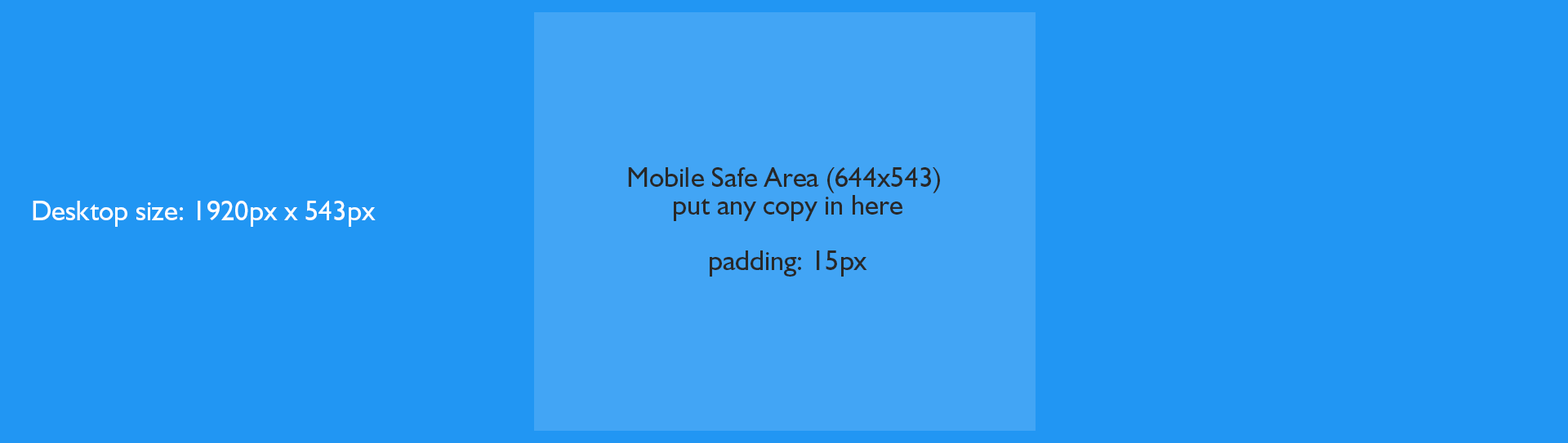
<style>
.page{position:relative;width:1568px;height:443px;background:#2196f3}
.page>*{position:absolute;margin:0}
.t1{font:28.1px/27.8px "Humanist521BT-Roman";color:#282828}
.t2{font:28.1px "Humanist521BT-Roman";color:#ffffff}
</style>
<div class="page">
<p class="t1" style="left:628px;top:167px;width:312px;height:110px;text-align:center">Mobile Safe Area (644x543) <br>put any copy in here<br><br>padding: 15px</p>
<p class="t2" style="left:33px;top:201px;width:343px;height:26px">Desktop size: 1920px x 543px</p>
</div>
